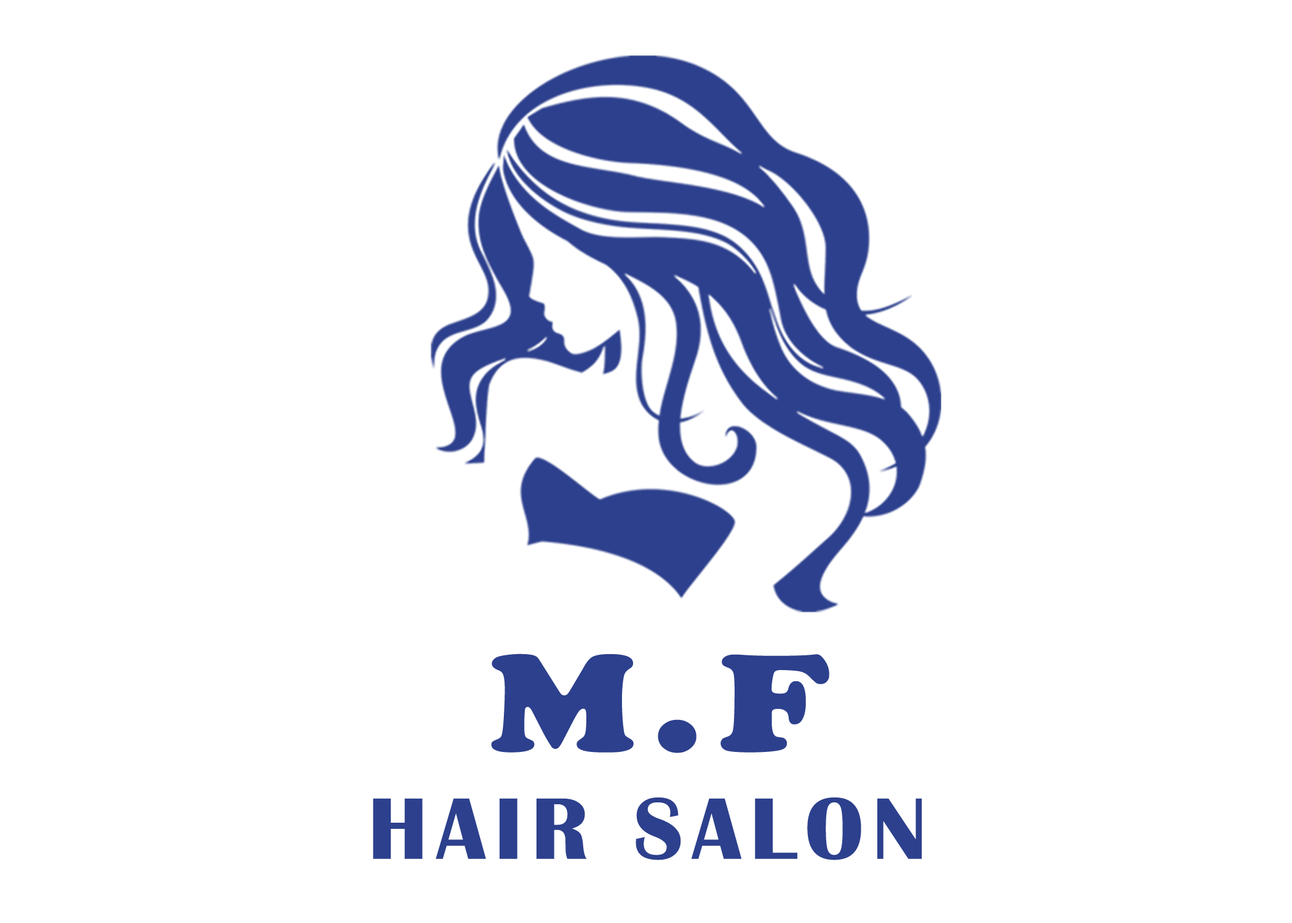
<style>
.page{position:relative;width:1292px;height:923px;background:#ffffff}
.page>*{position:absolute;margin:0}
.t1{font:143.1px "CooperBlack";letter-spacing:0.1em;color:#2d408d;text-transform:uppercase;scale:1.16 1}
.t2{font:90.4px "BritannicBold";letter-spacing:0.1em;color:#2d408d;text-transform:uppercase}
</style>
<div class="page">
<p class="t1" style="left:491px;top:653px;width:338px;height:100px">M.F</p>
<p class="t2" style="left:373px;top:797px;width:549px;height:63px">hair salon</p>
</div>
